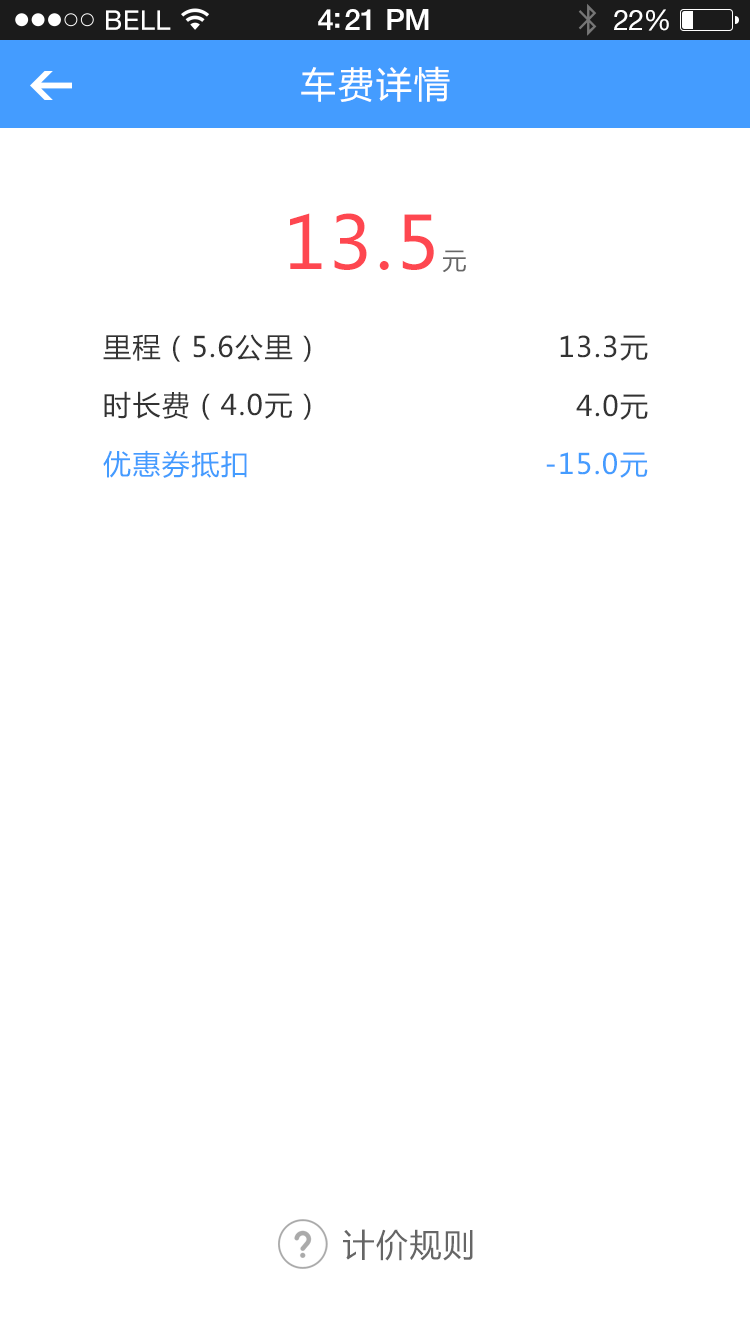
<style>
.page{position:relative;width:750px;height:1334px;background:#ffffff}
.page>*{position:absolute;margin:0}
.t1{font:36px "MicrosoftYaHei";letter-spacing:0.05em;color:#ffffff}
.t2{font:72px "MicrosoftYaHei";letter-spacing:0.05em;color:#fe4750}
.t3{font:24px "MicrosoftYaHei";letter-spacing:0.05em;color:#666666}
.t4{font:28px "MicrosoftYaHei";letter-spacing:0.05em;color:#333333}
.t5{font:28px "MicrosoftYaHei";letter-spacing:0.05em;color:#449cff}
.t6{font:32px "MicrosoftYaHei";letter-spacing:0.05em;color:#666666}
</style>
<div class="page">
<p class="t1" style="left:301px;top:66px;width:149px;height:36px">车费详情</p>
<p class="t2" style="left:290px;top:213px;width:176px;height:60px">13.5<span class="t3">元</span></p>
<p class="t4" style="left:103px;top:334px;width:208px;height:28px">里程（5.6公里）</p>
<p class="t4" style="left:560px;top:335px;width:88px;height:26px">13.3元</p>
<p class="t4" style="left:104px;top:391px;width:207px;height:29px">时长费（4.0元）</p>
<p class="t4" style="left:576px;top:394px;width:72px;height:26px">4.0元</p>
<p class="t5" style="left:103px;top:450px;width:144px;height:28px">优惠券抵扣</p>
<p class="t5" style="left:546px;top:452px;width:102px;height:26px">-15.0元</p>
<p class="t6" style="left:343px;top:1229px;width:130px;height:32px">计价规则</p>
</div>
